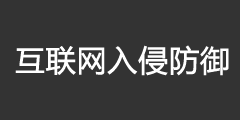
<style>
.page{position:relative;width:240px;height:120px;background:#333333}
.page>*{position:absolute;margin:0}
.t1{font:30px "MicrosoftYaHei";color:#ffffff;font-weight:bold}
</style>
<div class="page">
<p class="t1" style="left:15px;top:45px;width:214px;height:31px">互联网入侵防御</p>
</div>
